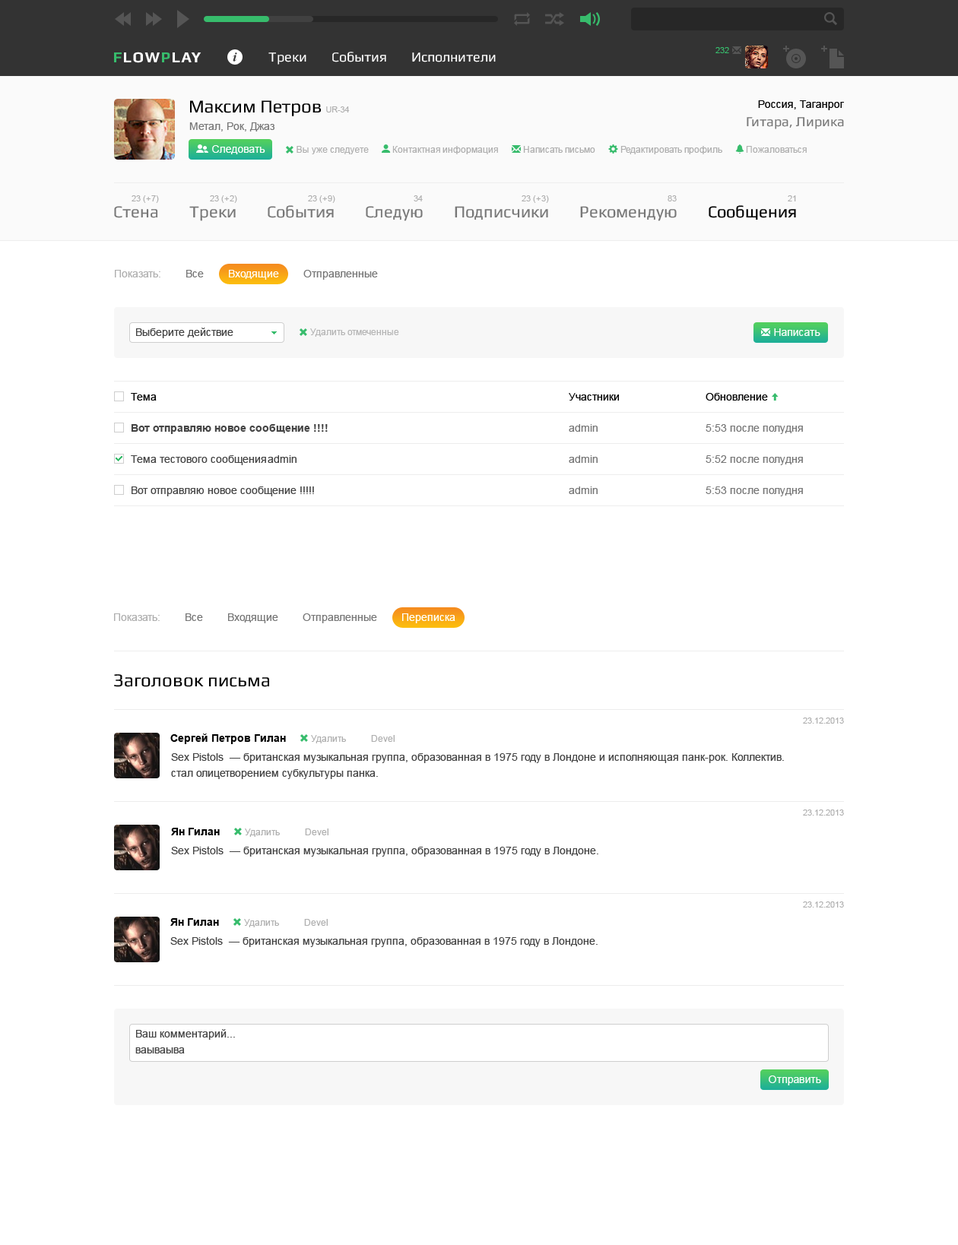
<style>
.page{position:relative;width:958px;height:1245px;background:#ffffff}
.page>*{position:absolute;margin:0}
.t1{font:18.2px "Play";color:#000000}
.t2{font:8.4px "ArialMT";color:#afafaf}
.t3{font:10.6px "ArialMT";color:#000000}
.t4{font:10.6px "ArialMT";color:#777777}
.t5{font:13.7px "Play";color:#777777}
.t6{font:10.6px "ArialMT";color:#ffffff}
.t7{font:9.1px "ArialMT";color:#afafaf}
.t8{font:16.7px "Play";color:#777777}
.t9{font:16.7px "Play";color:#000000}
.t10{font:10.6px "ArialMT";color:#afafaf}
.t11{font:10.6px "ArialMT";color:#444444}
.t12{font:9.1px "ArialMT";color:#b5b5b5}
.t13{font:10.6px/31.2px "ArialMT";color:#000000}
.t14{font:10.6px/31.2px "Arial-BoldMT";color:#444444}
.t15{font:10.6px/31.2px "ArialMT";color:#777777}
.t16{font:10.6px/31.2px "ArialMT";color:#444444}
.t17{font:10.6px "Arial-BoldMT";color:#000000}
.t18{font:10.6px/16px "ArialMT";color:#444444}
</style>
<div class="page">
<p class="t1" style="left:190px;top:100px;width:160px;height:16px">Максим Петров <span class="t2">UR-34</span></p>
<p class="t3" style="left:758px;top:100px;width:86px;height:10px">Россия, Таганрог</p>
<p class="t4" style="left:189px;top:122px;width:85px;height:9px">Метал, Рок, Джаз</p>
<p class="t5" style="left:746px;top:117px;width:98px;height:12px">Гитара, Лирика</p>
<p class="t6" style="left:212px;top:145px;width:53px;height:9px">Следовать</p>
<p class="t7" style="left:296px;top:146px;width:73px;height:8px">Вы уже следуете</p>
<p class="t7" style="left:392px;top:146px;width:330px;height:8px">Контактная информация           Написать письмо           Редактировать профиль</p>
<p class="t7" style="left:746px;top:146px;width:60px;height:7px">Пожаловаться</p>
<p class="t2" style="left:131px;top:195px;width:28px;height:8px">23 (+ 7)</p>
<p class="t2" style="left:210px;top:195px;width:27px;height:8px">23 (+ 2)</p>
<p class="t2" style="left:308px;top:195px;width:27px;height:8px">23 (+ 9)</p>
<p class="t2" style="left:413px;top:195px;width:10px;height:6px">34</p>
<p class="t2" style="left:521px;top:195px;width:28px;height:8px">23 (+ 3)</p>
<p class="t2" style="left:667px;top:195px;width:9px;height:6px">83</p>
<p class="t2" style="left:787px;top:195px;width:9px;height:6px">21</p>
<p class="t8" style="left:114px;top:205px;width:682px;height:16px">Стена        Треки        События        Следую        Подписчики        Рекомендую        <span class="t9">Сообщения</span></p>
<p class="t4" style="left:115px;top:270px;width:263px;height:10px"><span class="t10">Показать:</span>        Все        <span class="t6">Входящие</span>        Отправленные</p>
<p class="t11" style="left:136px;top:328px;width:97px;height:10px">Выберите действие</p>
<p class="t12" style="left:310px;top:328px;width:89px;height:9px">Удалить отмеченные</p>
<p class="t6" style="left:774px;top:328px;width:46px;height:8px">Написать</p>
<p class="t13" style="left:131px;top:393px;width:672px;height:103px">Тема                Участники    Обновление<br><span class="t14">Вот отправляю новое сообщение !!!!           </span><span class="t15">admin    5:53 после полудня<br></span><span class="t16">Тема тестового сообщения admin          </span><span class="t15">admin    5:52 после полудня<br></span><span class="t16">Вот отправляю новое сообщение !!!!!          </span><span class="t15">admin    5:53 после полудня</span></p>
<p class="t4" style="left:114px;top:613px;width:341px;height:10px"><span class="t10">Показать:</span>        Все        Входящие        Отправленные        <span class="t6">Переписка</span></p>
<p class="t1" style="left:114px;top:674px;width:155px;height:13px">Заголовок письма</p>
<p class="t2" style="left:803px;top:718px;width:41px;height:6px">23.12.2013</p>
<p class="t7" style="left:170px;top:734px;width:224px;height:10px"><span class="t17">Сергей Петров Гилан</span>           Удалить           Devel</p>
<p class="t18" style="left:171px;top:753px;width:613px;height:26px">Sex Pistols  — британская музыкальная группа, образованная в 1975 году в Лондоне и исполняющая панк-рок. Коллектив. <br>стал олицетворением субкультуры панка.</p>
<p class="t2" style="left:803px;top:810px;width:41px;height:6px">23.12.2013</p>
<p class="t7" style="left:171px;top:828px;width:157px;height:9px"><span class="t17">Ян Гилан</span>           Удалить           Devel</p>
<p class="t11" style="left:171px;top:846px;width:427px;height:11px">Sex Pistols  — британская музыкальная группа, образованная в 1975 году в Лондоне.</p>
<p class="t2" style="left:803px;top:901px;width:41px;height:7px">23.12.2013</p>
<p class="t7" style="left:170px;top:918px;width:158px;height:9px"><span class="t17">Ян Гилан</span>           Удалить           Devel</p>
<p class="t11" style="left:170px;top:936px;width:427px;height:11px">Sex Pistols  — британская музыкальная группа, образованная в 1975 году в Лондоне.</p>
<p class="t18" style="left:135px;top:1029px;width:100px;height:25px">Ваш комментарий...<br>ваываыва</p>
<p class="t6" style="left:768px;top:1076px;width:53px;height:9px">Отправить</p>
</div>
